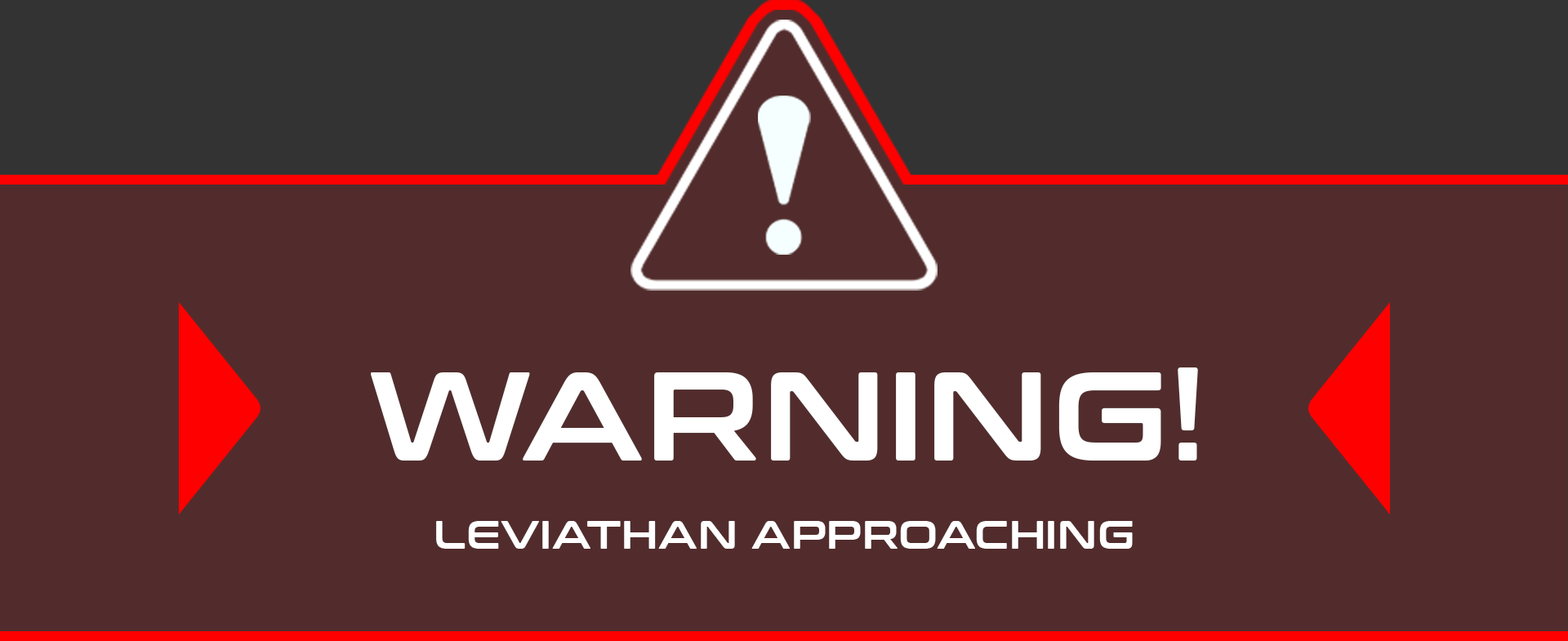
<style>
.page{position:relative;width:1568px;height:641px;background:#522c2c}
.page>*{position:absolute;margin:0}
.t1{font:125.8px "ConthraxSb-Regular";letter-spacing:0.02em;color:#ffffff}
.t2{font:39.6px "ConthraxSb-Regular";letter-spacing:0.02em;color:#ffffff}
</style>
<div class="page">
<p class="t1" style="left:371px;top:368px;width:827px;height:93px">WARNING!</p>
<p class="t2" style="left:436px;top:521px;width:697px;height:28px">LEVIATHAN APPROACHING</p>
</div>
